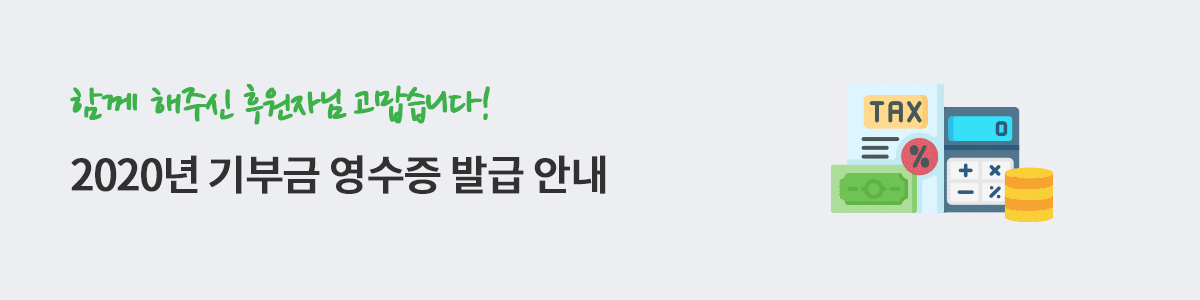
<style>
.page{position:relative;width:1200px;height:300px;background:#edeef2}
.page>*{position:absolute;margin:0}
.t1{font:41.7px/72px "NotoSansCJKkr-Medium";letter-spacing:-0.05em;color:#313131;font-weight:bold}
.t2{font:48px/72px "NanumPen";letter-spacing:-0.05em;color:#3cb149;font-weight:bold}
</style>
<div class="page">
<p class="t1" style="left:70px;top:84px;width:536px;height:110px"><span class="t2">함께 해주신 후원자님 고맙습니다!<br></span>2020년 기부금 영수증 발급 안내</p>
</div>
